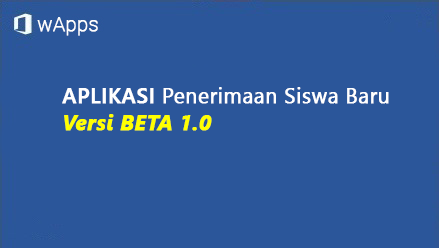
<style>
.page{position:relative;width:439px;height:248px;background:#2b569a}
.page>*{position:absolute;margin:0}
.t1{font:21.3px "SegoeUI";color:#ffffff;font-weight:bold}
.t2{font:21.3px "SegoeUI-Semibold";color:#ffffff;font-weight:bold}
.t3{font:21.3px "SegoeUI-BoldItalic";color:#ffff00;font-weight:bold}
</style>
<div class="page">
<p class="t1" style="left:62px;top:87px;width:327px;height:17px"><span class="t2">APLIKASI</span> Penerimaan Siswa Baru</p>
<p class="t3" style="left:64px;top:114px;width:148px;height:17px">Versi BETA 1.0</p>
</div>
